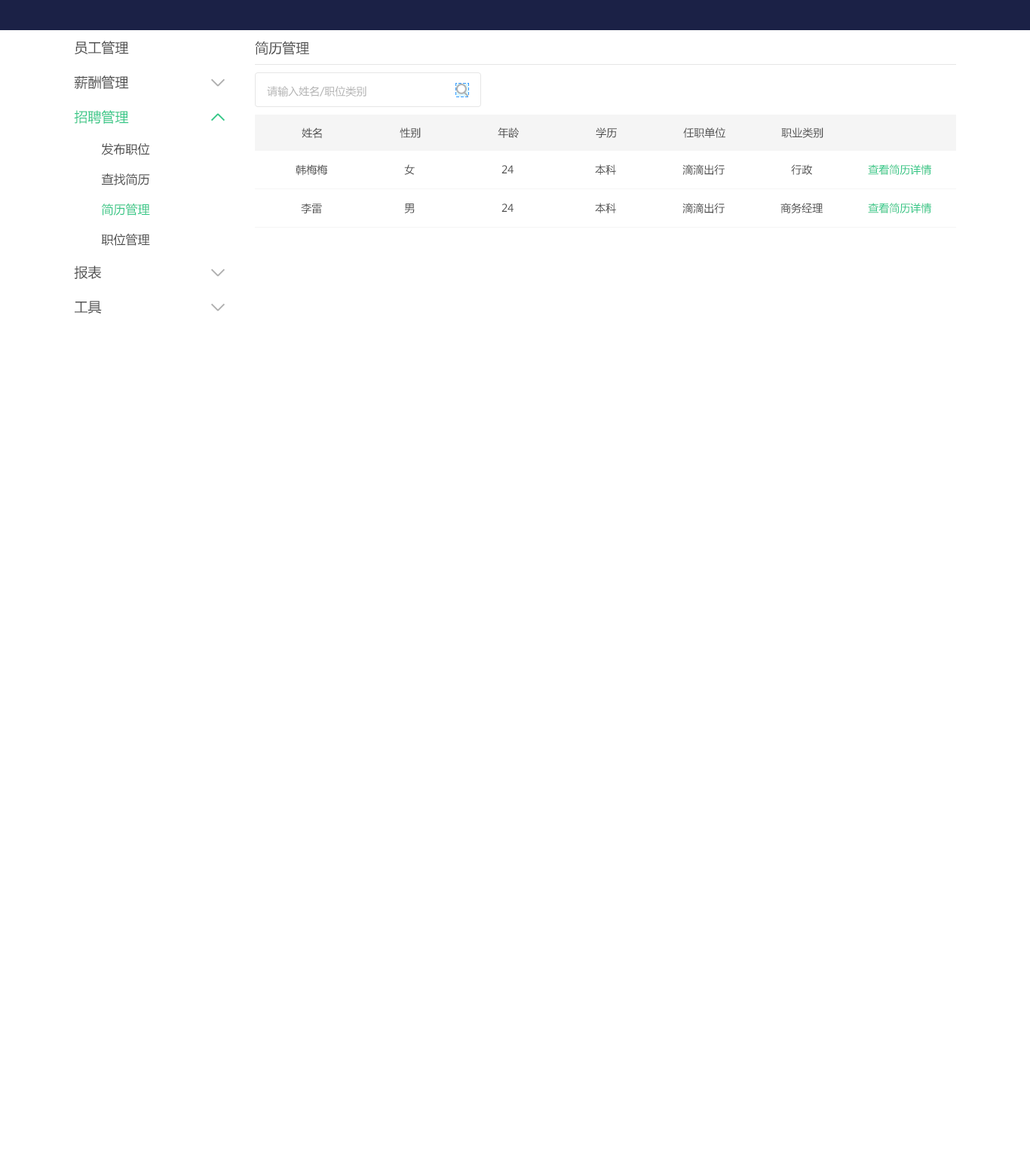
<style>
.page{position:relative;width:1030px;height:1158px;background:#ffffff}
.page>*{position:absolute;margin:0}
.t1{font:13.6px "MicrosoftYaHei";color:#4d4d4d}
.t2{font:10.6px "MicrosoftYaHei";color:#b3b3b3}
.t3{font:13.6px "MicrosoftYaHei";color:#35c787}
.t4{font:10.6px "MicrosoftYaHei";color:#4d4d4d}
.t5{font:10.5px "MicrosoftYaHei";color:#4d4d4d}
.t6{font:12.1px "MicrosoftYaHei";color:#4d4d4d}
.t7{font:10.5px "MicrosoftYaHei";color:#35c787}
.t8{font:12.1px "MicrosoftYaHei";color:#35c787}
</style>
<div class="page">
<p class="t1" style="left:75px;top:41px;width:54px;height:13px">员工管理</p>
<p class="t1" style="left:255px;top:41px;width:54px;height:14px">简历管理</p>
<p class="t1" style="left:74px;top:75px;width:55px;height:14px">薪酬管理</p>
<p class="t2" style="left:267px;top:86px;width:99px;height:10px">请输入姓名/职位类别</p>
<p class="t3" style="left:74px;top:110px;width:55px;height:14px">招聘管理</p>
<p class="t4" style="left:302px;top:127px;width:20px;height:12px">姓名</p>
<p class="t5" style="left:400px;top:127px;width:21px;height:11px">性别</p>
<p class="t5" style="left:498px;top:127px;width:21px;height:11px">年龄</p>
<p class="t5" style="left:596px;top:127px;width:21px;height:11px">学历</p>
<p class="t5" style="left:683px;top:127px;width:42px;height:11px">任职单位</p>
<p class="t5" style="left:781px;top:127px;width:42px;height:11px">职业类别</p>
<p class="t6" style="left:101px;top:143px;width:49px;height:12px">发布职位</p>
<p class="t6" style="left:101px;top:173px;width:49px;height:12px">查找简历</p>
<p class="t4" style="left:296px;top:164px;width:32px;height:12px">韩梅梅</p>
<p class="t5" style="left:404px;top:164px;width:11px;height:11px">女</p>
<p class="t5" style="left:501px;top:165px;width:12px;height:8px">24</p>
<p class="t5" style="left:595px;top:164px;width:21px;height:11px">本科</p>
<p class="t5" style="left:682px;top:164px;width:42px;height:11px">滴滴出行</p>
<p class="t5" style="left:791px;top:164px;width:21px;height:11px">行政</p>
<p class="t7" style="left:868px;top:164px;width:63px;height:11px">查看简历详情</p>
<p class="t8" style="left:101px;top:204px;width:49px;height:12px">简历管理</p>
<p class="t5" style="left:301px;top:203px;width:21px;height:10px">李雷</p>
<p class="t5" style="left:404px;top:204px;width:11px;height:9px">男</p>
<p class="t5" style="left:501px;top:204px;width:12px;height:8px">24</p>
<p class="t5" style="left:595px;top:203px;width:21px;height:10px">本科</p>
<p class="t5" style="left:682px;top:203px;width:42px;height:10px">滴滴出行</p>
<p class="t5" style="left:780px;top:203px;width:42px;height:10px">商务经理</p>
<p class="t7" style="left:868px;top:203px;width:63px;height:10px">查看简历详情</p>
<p class="t6" style="left:101px;top:234px;width:49px;height:12px">职位管理</p>
<p class="t1" style="left:74px;top:265px;width:28px;height:14px">报表</p>
<p class="t1" style="left:75px;top:301px;width:27px;height:13px">工具</p>
</div>
